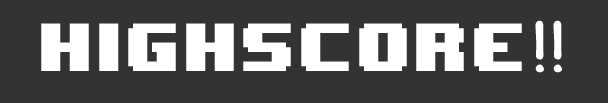
<style>
.page{position:relative;width:608px;height:103px;background:#333333}
.page>*{position:absolute;margin:0}
.t1{font:57px "8BITWONDERNominal";letter-spacing:0.01em;color:#ffffff}
.t2{font:72px "Andy-Bold";letter-spacing:0.01em;color:#ffffff}
</style>
<div class="page">
<p class="t1" style="left:41px;top:20px;width:521px;height:53px">HIGHSCORE<span class="t2">!!</span></p>
</div>
